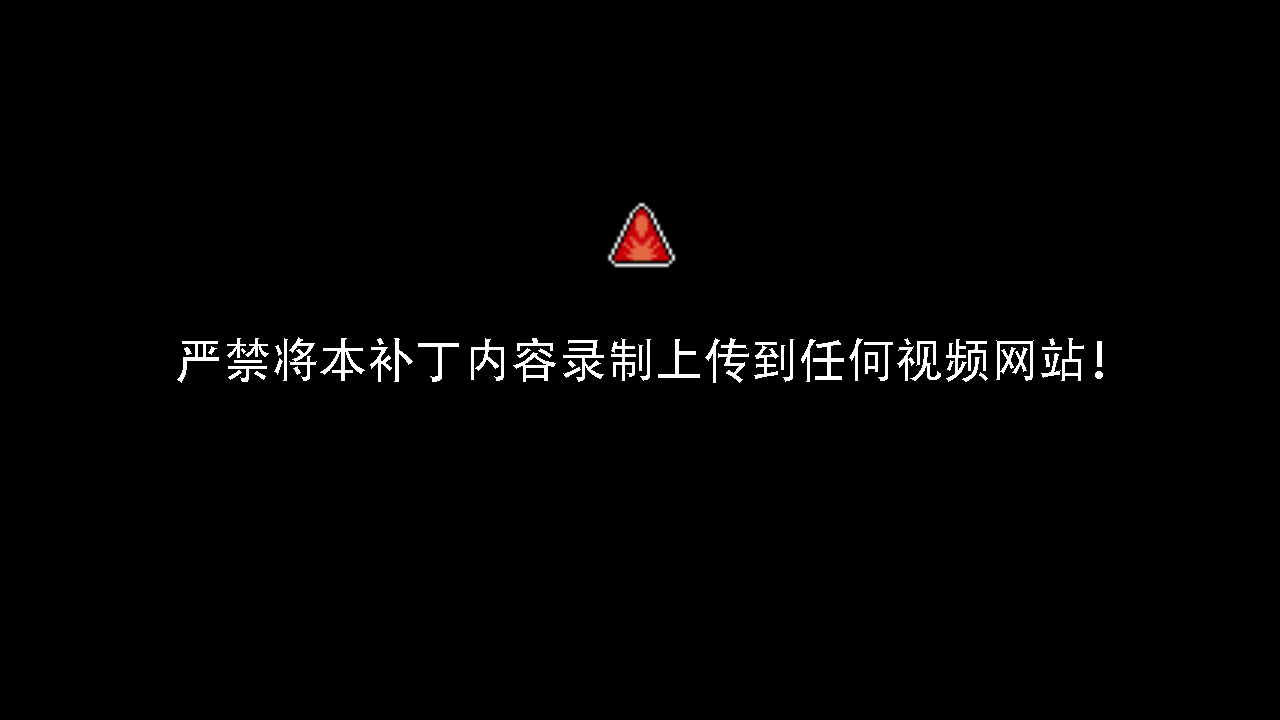
<style>
.page{position:relative;width:1280px;height:720px;background:#000000}
.page>*{position:absolute;margin:0}
.t1{font:48px "AdobeHeitiStd-Regular";color:#ffffff}
</style>
<div class="page">
<p class="t1" style="left:177px;top:337px;width:926px;height:46px">严禁将本补丁内容录制上传到任何视频网站！</p>
</div>
